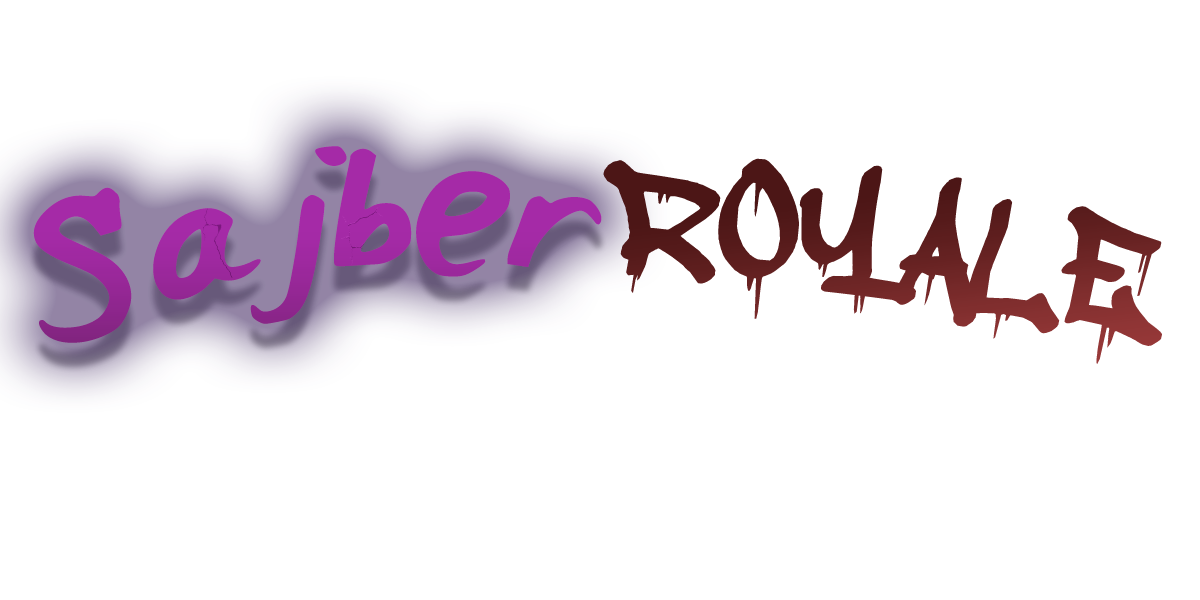
<style>
.page{position:relative;width:1200px;height:600px;background:#ffffff}
.page>*{position:absolute;margin:0}
.t1{font:229.7px "Girly";color:#a42aa6}
.t2{font:229.7px "Girly";letter-spacing:-0.1em;color:#a42aa6}
.t3{font:201.9px "adrippingmarker";color:#5e1e1e}
</style>
<div class="page">
<p class="t1" style="left:33px;top:146px;width:569px;height:197px;rotate:-8deg">S<span class="t2">aj</span>ber</p>
<p class="t3" style="left:603px;top:158px;width:559px;height:206px;rotate:8deg">ROYALE</p>
</div>
